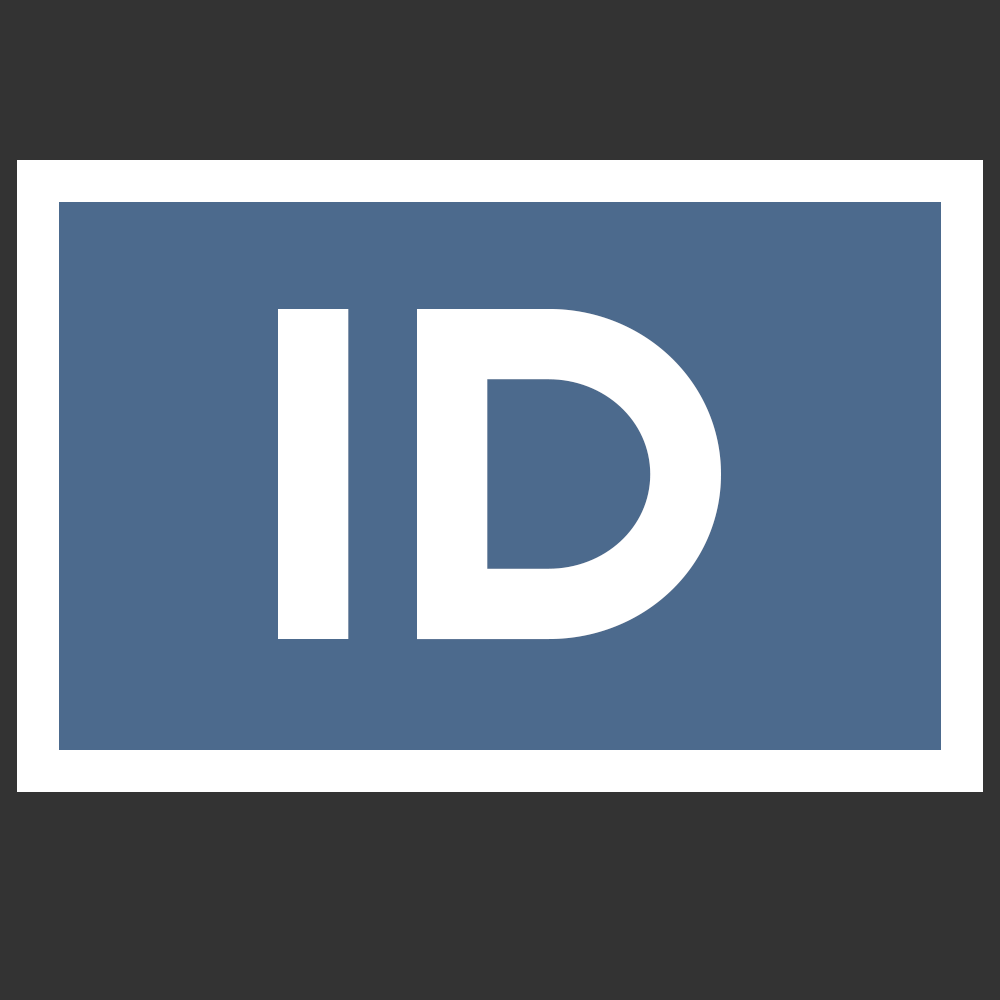
<style>
.page{position:relative;width:1000px;height:1000px;background:#4c6a8d}
.page>*{position:absolute;margin:0}
.t1{font:467.8px "Arya-Single";color:#ffffff}
</style>
<div class="page">
<p class="t1" style="left:278px;top:309px;width:443px;height:331px">ID</p>
</div>
